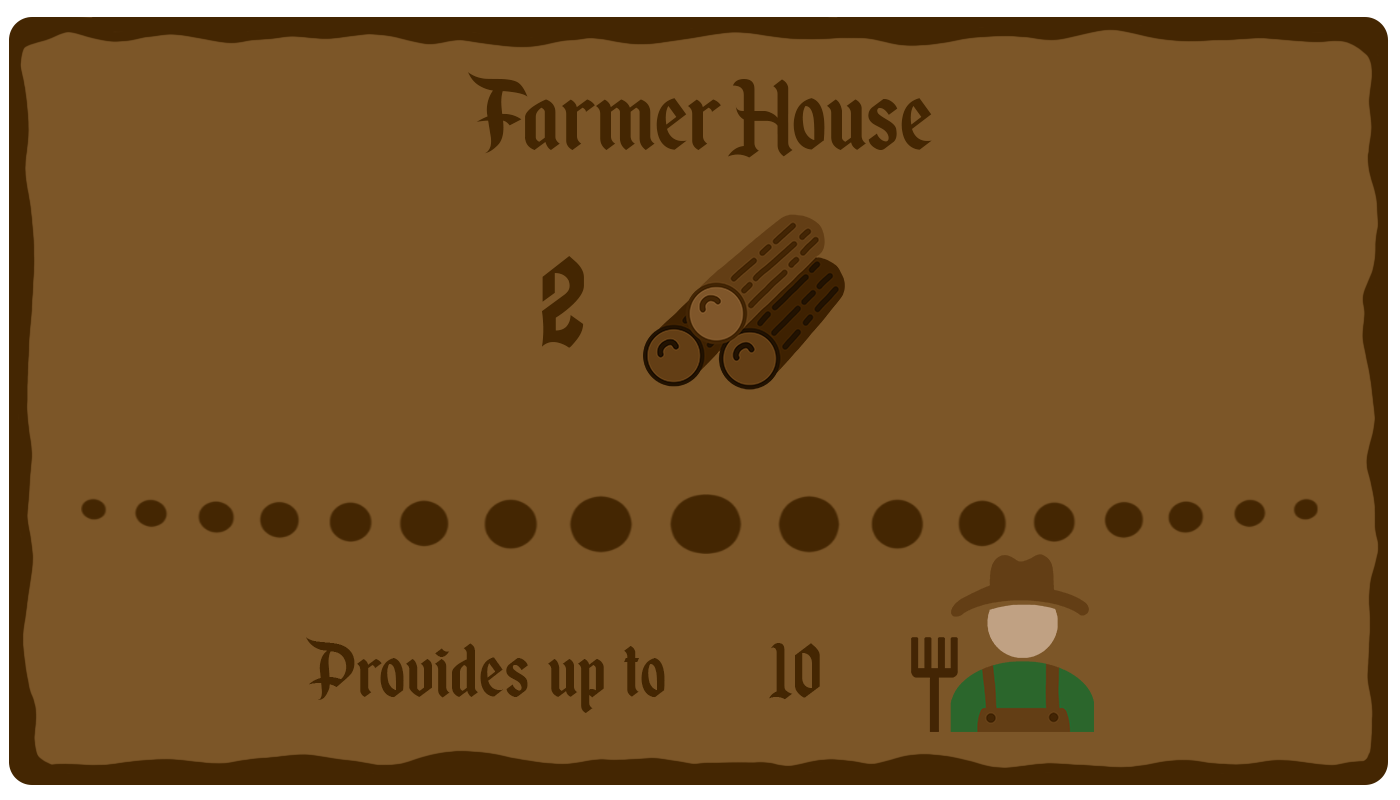
<style>
.page{position:relative;width:1400px;height:800px;background:#7c5628}
.page>*{position:absolute;margin:0}
.t1{font:120px "EnchantedLand";color:#442602}
.t2{font:150px "EnchantedLand";color:#442602}
.t3{font:90px "EnchantedLand";color:#442602}
</style>
<div class="page">
<p class="t1" style="left:468px;top:71px;width:464px;height:87px">Farmer House</p>
<p class="t2" style="left:542px;top:256px;width:42px;height:92px">2</p>
<p class="t3" style="left:306px;top:637px;width:514px;height:76px">Provides  up  to           10</p>
</div>
